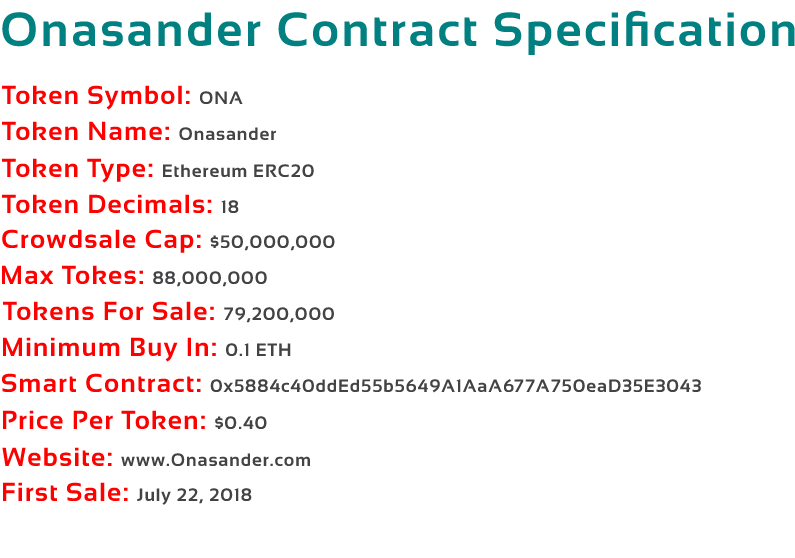
<style>
.page{position:relative;width:795px;height:558px;background:#ffffff}
.page>*{position:absolute;margin:0}
.t1{font:48px "Sansation-Bold";letter-spacing:0.05em;color:#008080}
.t2{font:26px "Sansation-Bold";letter-spacing:0.05em;color:#ff0000}
.t3{font:18px "Sansation-Bold";letter-spacing:0.05em;color:#434244}
</style>
<div class="page">
<p class="t1" style="left:2px;top:10px;width:793px;height:45px">Onasander Contract Specification</p>
<p class="t2" style="left:2px;top:85px;width:241px;height:25px">Token Symbol: <span class="t3">ONA</span></p>
<p class="t2" style="left:2px;top:121px;width:274px;height:19px">Token Name: <span class="t3">Onasander</span></p>
<p class="t3" style="left:2px;top:158px;width:312px;height:25px"><span class="t2">Token Type: </span>Ethereum ERC20</p>
<p class="t2" style="left:2px;top:194px;width:237px;height:19px">Token Decimals: <span class="t3">18</span></p>
<p class="t2" style="left:2px;top:229px;width:333px;height:24px">Crowdsale Cap: <span class="t3">$50,000,000</span></p>
<p class="t2" style="left:2px;top:265px;width:265px;height:22px">Max Tokes: <span class="t3">88,000,000</span></p>
<p class="t2" style="left:3px;top:301px;width:331px;height:22px">Tokens For Sale: <span class="t3">79,200,000</span></p>
<p class="t2" style="left:3px;top:337px;width:288px;height:25px">Minimum Buy In: <span class="t3">0.1 ETH</span></p>
<p class="t3" style="left:2px;top:373px;width:699px;height:20px"><span class="t2">Smart Contract: </span>0x5884c40ddEd55b5649A1AaA677A750eaD35E3043</p>
<p class="t2" style="left:3px;top:410px;width:264px;height:19px">Price Per Token: <span class="t3">$0.40</span></p>
<p class="t3" style="left:2px;top:447px;width:308px;height:19px"><span class="t2">Website: </span>www.Onasander.com</p>
<p class="t3" style="left:3px;top:482px;width:249px;height:23px"><span class="t2">First Sale: </span>July 22, 2018</p>
</div>
